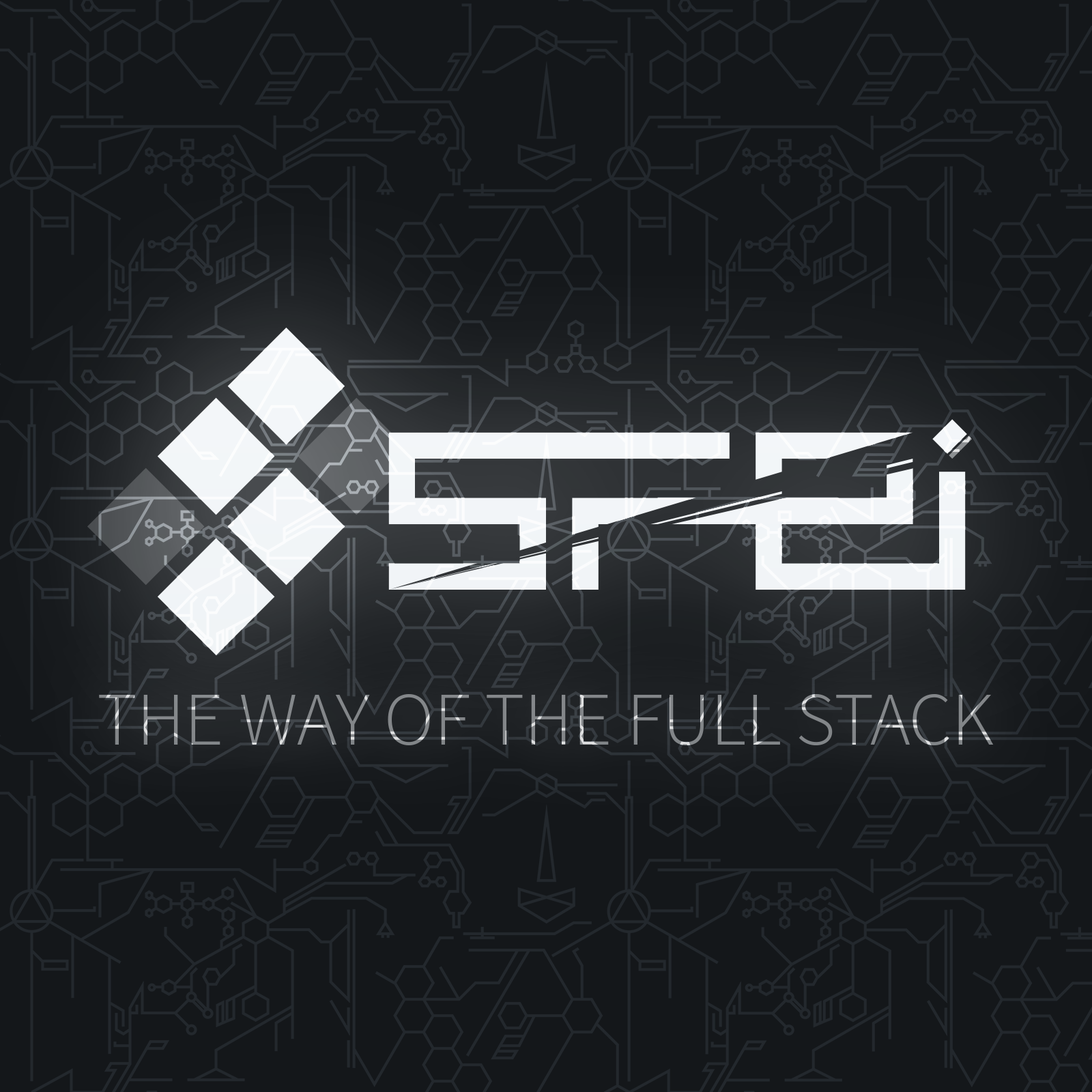
<style>
.page{position:relative;width:1092px;height:1092px;background:#14171a}
.page>*{position:absolute;margin:0}
.t1{font:76.4px "SourceSansPro-Light";color:#83878a}
</style>
<div class="page">
<p class="t1" style="left:99px;top:694px;width:895px;height:51px">THE WAY OF THE FULL STACK</p>
</div>
